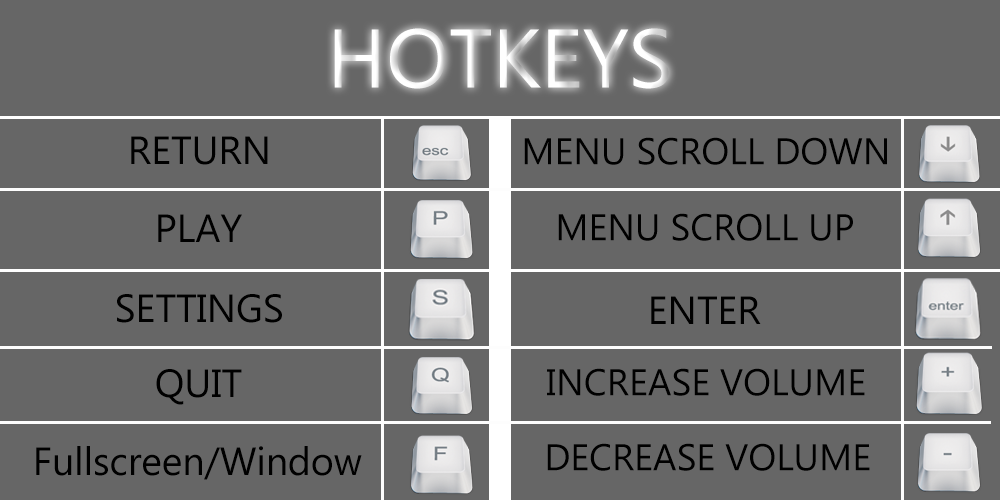
<style>
.page{position:relative;width:1000px;height:500px;background:#666666}
.page>*{position:absolute;margin:0}
.t1{font:83.1px "MicrosoftTaiLe";color:#ffffff}
.t2{font:39.1px "MicrosoftTaiLe";color:#000000}
.t3{font:37px "MicrosoftTaiLe";color:#000000}
</style>
<div class="page">
<p class="t1" style="left:334px;top:28px;width:335px;height:61px">HOTKEYS</p>
<p class="t2" style="left:131px;top:136px;width:137px;height:29px">RETURN</p>
<p class="t3" style="left:524px;top:137px;width:363px;height:28px">MENU SCROLL DOWN</p>
<p class="t2" style="left:158px;top:214px;width:84px;height:28px">PLAY</p>
<p class="t3" style="left:558px;top:213px;width:295px;height:28px">MENU SCROLL UP</p>
<p class="t2" style="left:117px;top:294px;width:165px;height:29px">SETTINGS</p>
<p class="t2" style="left:651px;top:296px;width:110px;height:28px">ENTER</p>
<p class="t2" style="left:156px;top:369px;width:86px;height:36px">QUIT</p>
<p class="t3" style="left:547px;top:368px;width:318px;height:28px">INCREASE VOLUME</p>
<p class="t2" style="left:36px;top:446px;width:326px;height:34px">Fullscreen/Window</p>
<p class="t3" style="left:547px;top:443px;width:323px;height:28px">DECREASE VOLUME</p>
</div>
